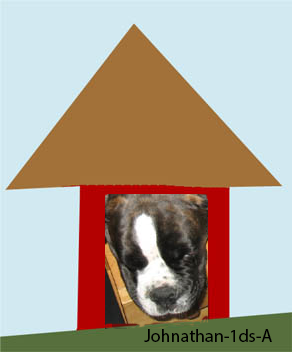
<style>
.page{position:relative;width:292px;height:352px;background:#d2e9f1}
.page>*{position:absolute;margin:0}
.t1{font:18px "MyriadPro-Regular";color:#000000}
</style>
<div class="page">
<p class="t1" style="left:144px;top:329px;width:128px;height:13px">Johnathan-1ds-A</p>
</div>
